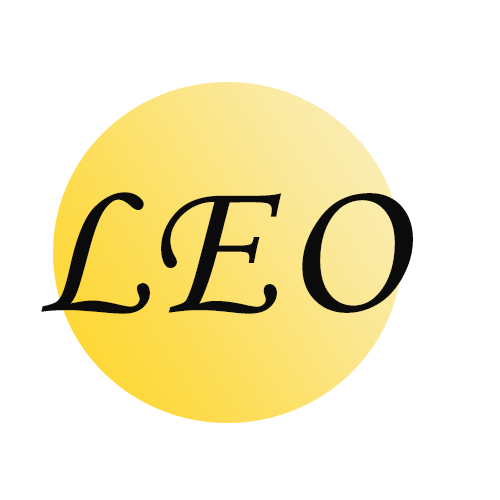
<style>
.page{position:relative;width:500px;height:500px;background:#ffffff}
.page>*{position:absolute;margin:0}
.t1{font:200px "STLiti";color:#0b0b0b}
</style>
<div class="page">
<p class="t1" style="left:41px;top:192px;width:372px;height:122px">LEO</p>
</div>
